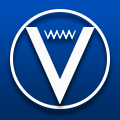
<style>
.page{position:relative;width:120px;height:120px}
.page>*{position:absolute;margin:0}
.t1{font:120px "TwCenMT-Regular";color:#fbfbfb}
</style>
<div class="page">
<p class="t1" style="left:25px;top:27px;width:70px;height:77px">V</p>
</div>
